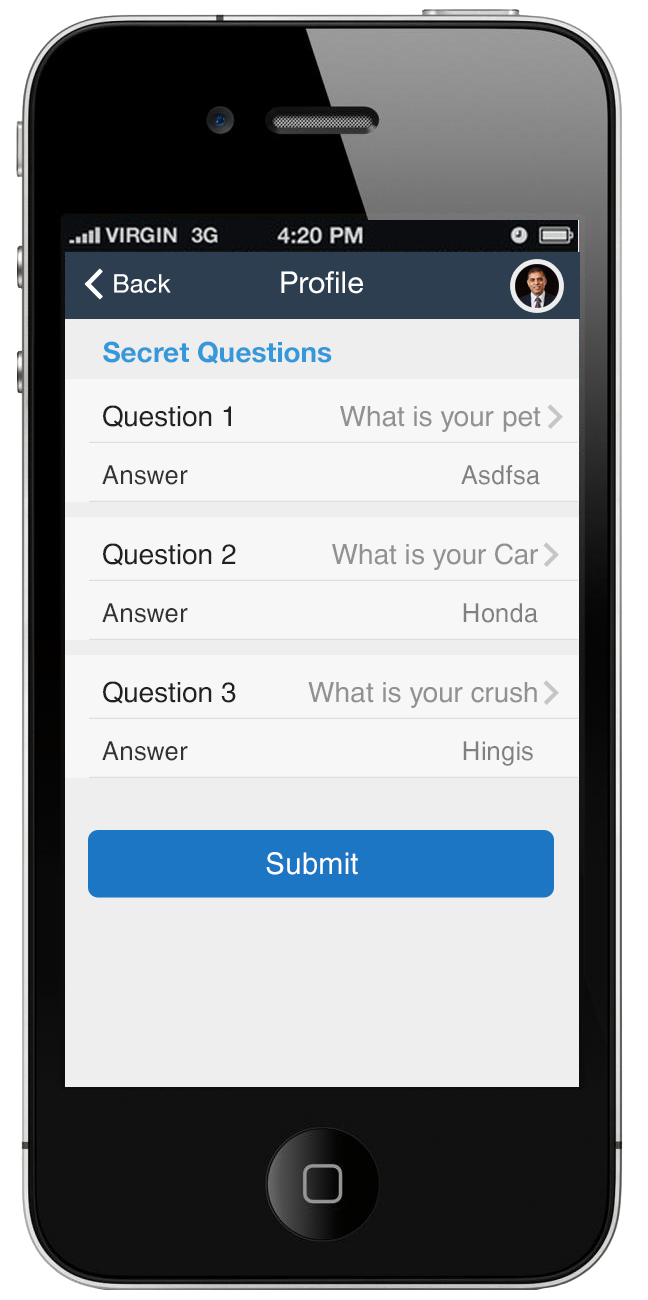
<style>
.page{position:relative;width:648px;height:1300px}
.page>*{position:absolute;margin:0}
.t1{font:25.5px "HelveticaNeue";color:#ffffff}
.t2{font:30px "HelveticaNeue";color:#ffffff}
.t3{font:28px "HelveticaNeue-Bold";color:#3498db}
.t4{font:28px "HelveticaCE-Regular";color:#919191}
.t5{font:28px "HelveticaCE-Regular";color:#212121}
.t6{font:26px "HelveticaCyr-Upright";color:#333333}
.t7{font:26px "HelveticaCyr-Upright";color:#808080}
.t8{font:30px "HelveticaCyr-Upright";color:#ffffff}
</style>
<div class="page">
<p class="t1" style="left:114px;top:274px;width:57px;height:19px">Back</p>
<p class="t2" style="left:281px;top:271px;width:82px;height:23px">Profile</p>
<p class="t3" style="left:103px;top:341px;width:229px;height:23px">Secret Questions</p>
<p class="t4" style="left:103px;top:405px;width:438px;height:27px"><span class="t5">Question 1             </span>What is your pet</p>
<p class="t6" style="left:102px;top:465px;width:438px;height:20px">Answer       <span class="t7">             Asdfsa</span></p>
<p class="t4" style="left:103px;top:543px;width:435px;height:27px"><span class="t5">Question 2            </span>What is your Car</p>
<p class="t6" style="left:102px;top:603px;width:436px;height:20px">Answer       <span class="t7">         Honda</span></p>
<p class="t4" style="left:103px;top:681px;width:434px;height:27px"><span class="t5">Question 3         </span>What is your crush</p>
<p class="t6" style="left:102px;top:741px;width:431px;height:25px">Answer       <span class="t7">         Hingis</span></p>
<p class="t8" style="left:266px;top:852px;width:92px;height:23px">Submit</p>
</div>
